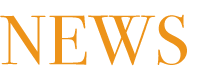
<style>
.page{position:relative;width:202px;height:84px;background:#ffffff}
.page>*{position:absolute;margin:0}
.t1{font:69.7px "BodoniSvtyTwoOSITCTT-Book";letter-spacing:0.02em;color:#ed9319}
</style>
<div class="page">
<p class="t1" style="left:0px;top:14px;width:187px;height:52px">NEWS</p>
</div>
